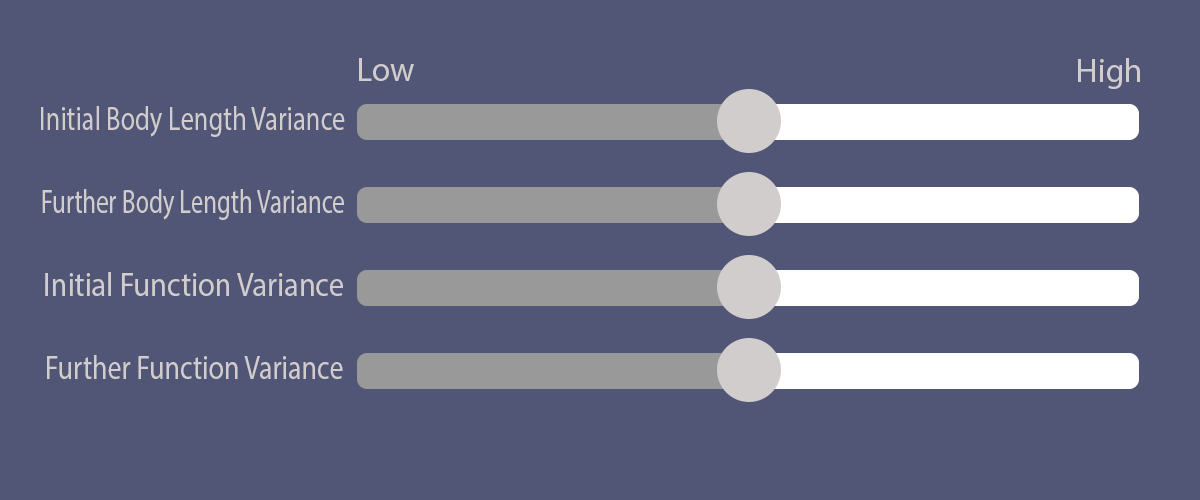
<style>
.page{position:relative;width:1200px;height:500px;background:#515677}
.page>*{position:absolute;margin:0}
.t1{font:33.3px "MyriadPro-Regular";color:#d1cdcd}
.t2{font:33.3px "MyriadPro-Regular";color:#d1cdcd;scale:0.8 1}
.t3{font:33.3px "MyriadPro-Regular";color:#d1cdcd;scale:0.74 1}
.t4{font:33.3px "MyriadPro-Regular";color:#d1cdcd;scale:0.91 1}
.t5{font:33.3px "MyriadPro-Regular";color:#d1cdcd;scale:0.84 1}
</style>
<div class="page">
<p class="t1" style="left:359px;top:58px;width:55px;height:23px">Low</p>
<p class="t1" style="left:1078px;top:58px;width:62px;height:31px">High</p>
<p class="t2" style="left:41px;top:106px;width:304px;height:31px">Initial Body Length Variance</p>
<p class="t3" style="left:42px;top:189px;width:302px;height:31px">Further Body Length Variance</p>
<p class="t4" style="left:45px;top:272px;width:298px;height:24px">Initial Function Variance</p>
<p class="t5" style="left:47px;top:355px;width:296px;height:24px">Further Function Variance</p>
</div>
